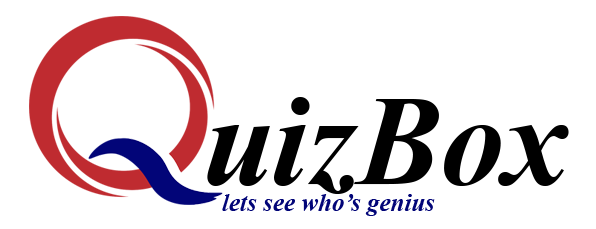
<style>
.page{position:relative;width:596px;height:229px;background:#ffffff}
.page>*{position:absolute;margin:0}
.t1{font:128px "TimesNewRomanPS-BoldItalicMT";color:#000000}
.t2{font:25px "TimesNewRomanPS-BoldItalicMT";color:#020578}
</style>
<div class="page">
<p class="t1" style="left:207px;top:97px;width:362px;height:97px">uizBox</p>
<p class="t2" style="left:222px;top:194px;width:213px;height:22px">lets see who’s genius</p>
</div>
